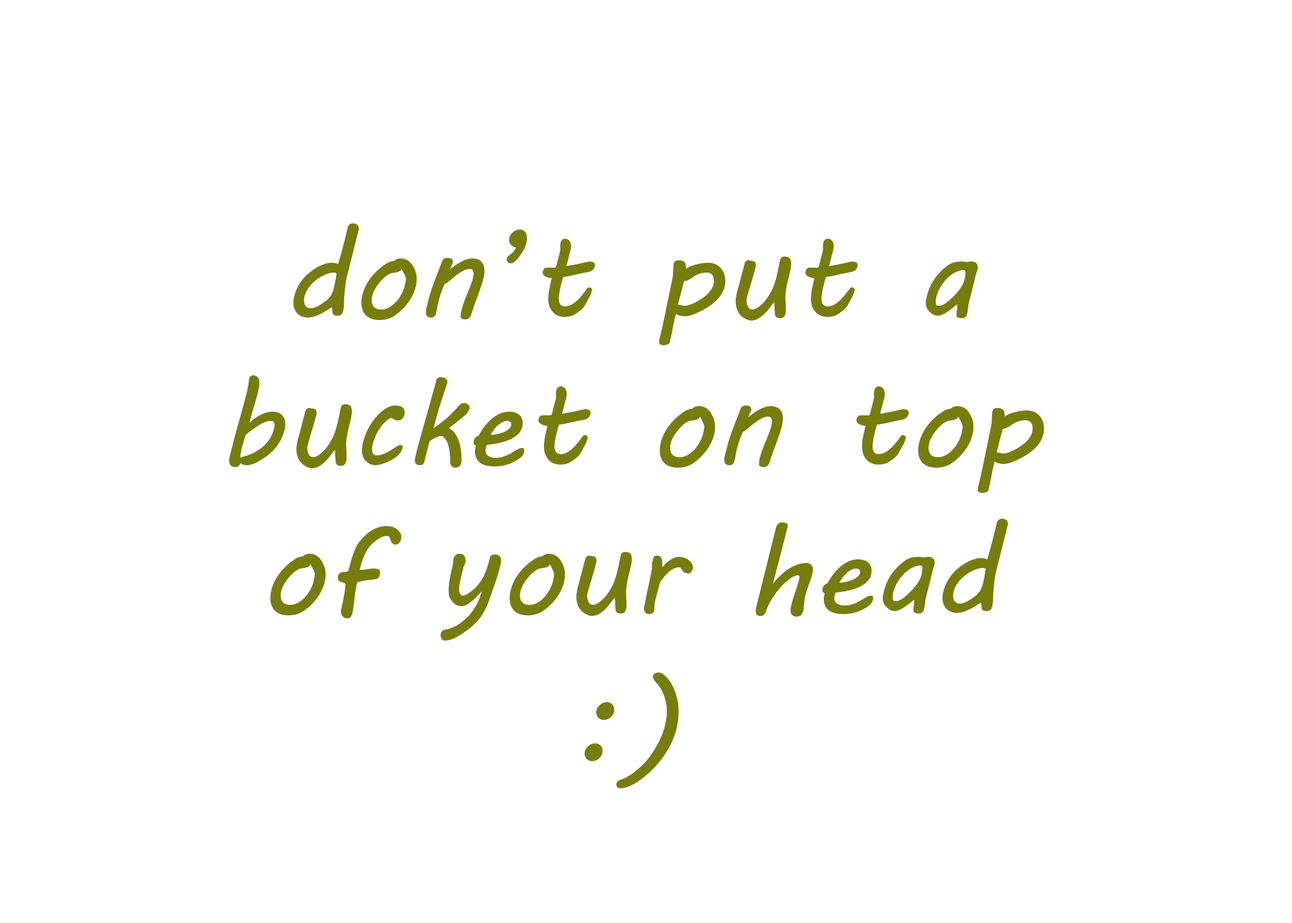
<style>
.page{position:relative;width:1292px;height:923px;background:#ffffff}
.page>*{position:absolute;margin:0}
.t1{font:123.1px "MVBoli";color:#767d0b}
</style>
<div class="page">
<p class="t1" style="left:229px;top:223px;width:815px;height:565px;text-align:center">don’t put a bucket on top of your head :)</p>
</div>
